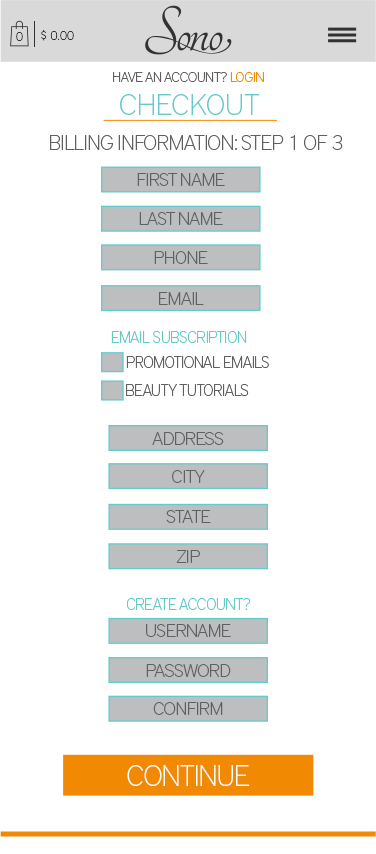
<style>
.page{position:relative;width:376px;height:854px;background:#ffffff}
.page>*{position:absolute;margin:0}
.t1{font:12.4px "DistrictPro-Thin";color:#323232}
.t2{font:14px "DistrictPro-Thin";letter-spacing:-0.031em;color:#5f6062}
.t3{font:14px "DistrictPro-Thin";letter-spacing:-0.031em;color:#f38b00}
.t4{font:30px "DistrictPro-Thin";color:#65cbc9}
.t5{font:21px "DistrictPro-Thin";letter-spacing:-0.031em;color:#5f6062}
.t6{font:18.5px "DistrictPro-Thin";letter-spacing:-0.031em;color:#5f6062}
.t7{font:15.8px "DistrictPro-Thin";letter-spacing:-0.031em;color:#65cbc9}
.t8{font:15.8px "DistrictPro-Thin";letter-spacing:-0.031em;color:#5f6062}
.t9{font:29px "DistrictPro-Thin";letter-spacing:-0.031em;color:#ffffff}
</style>
<div class="page">
<p class="t1" style="left:41px;top:29px;width:33px;height:12px">$ 0.00</p>
<p class="t1" style="left:16px;top:32px;width:7px;height:9px">0</p>
<p class="t2" style="left:113px;top:72px;width:151px;height:10px">HAVE AN ACCOUNT? <span class="t3">LOGIN</span></p>
<p class="t4" style="left:120px;top:94px;width:139px;height:21px">CHECKOUT</p>
<p class="t5" style="left:50px;top:135px;width:293px;height:15px">BILLING INFORMATION: STEP 1 OF 3</p>
<p class="t6" style="left:137px;top:173px;width:88px;height:13px">FIRST NAME</p>
<p class="t6" style="left:139px;top:212px;width:84px;height:13px">LAST NAME</p>
<p class="t6" style="left:154px;top:251px;width:54px;height:13px">PHONE</p>
<p class="t6" style="left:159px;top:292px;width:45px;height:13px">EMAIL</p>
<p class="t7" style="left:111px;top:331px;width:136px;height:12px">EMAIL SUBSCRIPTION</p>
<p class="t8" style="left:126px;top:356px;width:143px;height:12px">PROMOTIONAL EMAILS</p>
<p class="t8" style="left:126px;top:384px;width:123px;height:12px">BEAUTY TUTORIALS</p>
<p class="t6" style="left:152px;top:432px;width:72px;height:13px">ADDRESS</p>
<p class="t6" style="left:172px;top:470px;width:33px;height:13px">CITY</p>
<p class="t6" style="left:166px;top:510px;width:45px;height:13px">STATE</p>
<p class="t6" style="left:176px;top:550px;width:24px;height:13px">ZIP</p>
<p class="t7" style="left:126px;top:598px;width:125px;height:12px">CREATE ACCOUNT?</p>
<p class="t6" style="left:146px;top:624px;width:85px;height:13px">USERNAME</p>
<p class="t6" style="left:146px;top:664px;width:85px;height:13px">PASSWORD</p>
<p class="t6" style="left:153px;top:702px;width:70px;height:13px">CONFIRM</p>
<p class="t9" style="left:127px;top:765px;width:123px;height:21px">CONTINUE</p>
</div>
